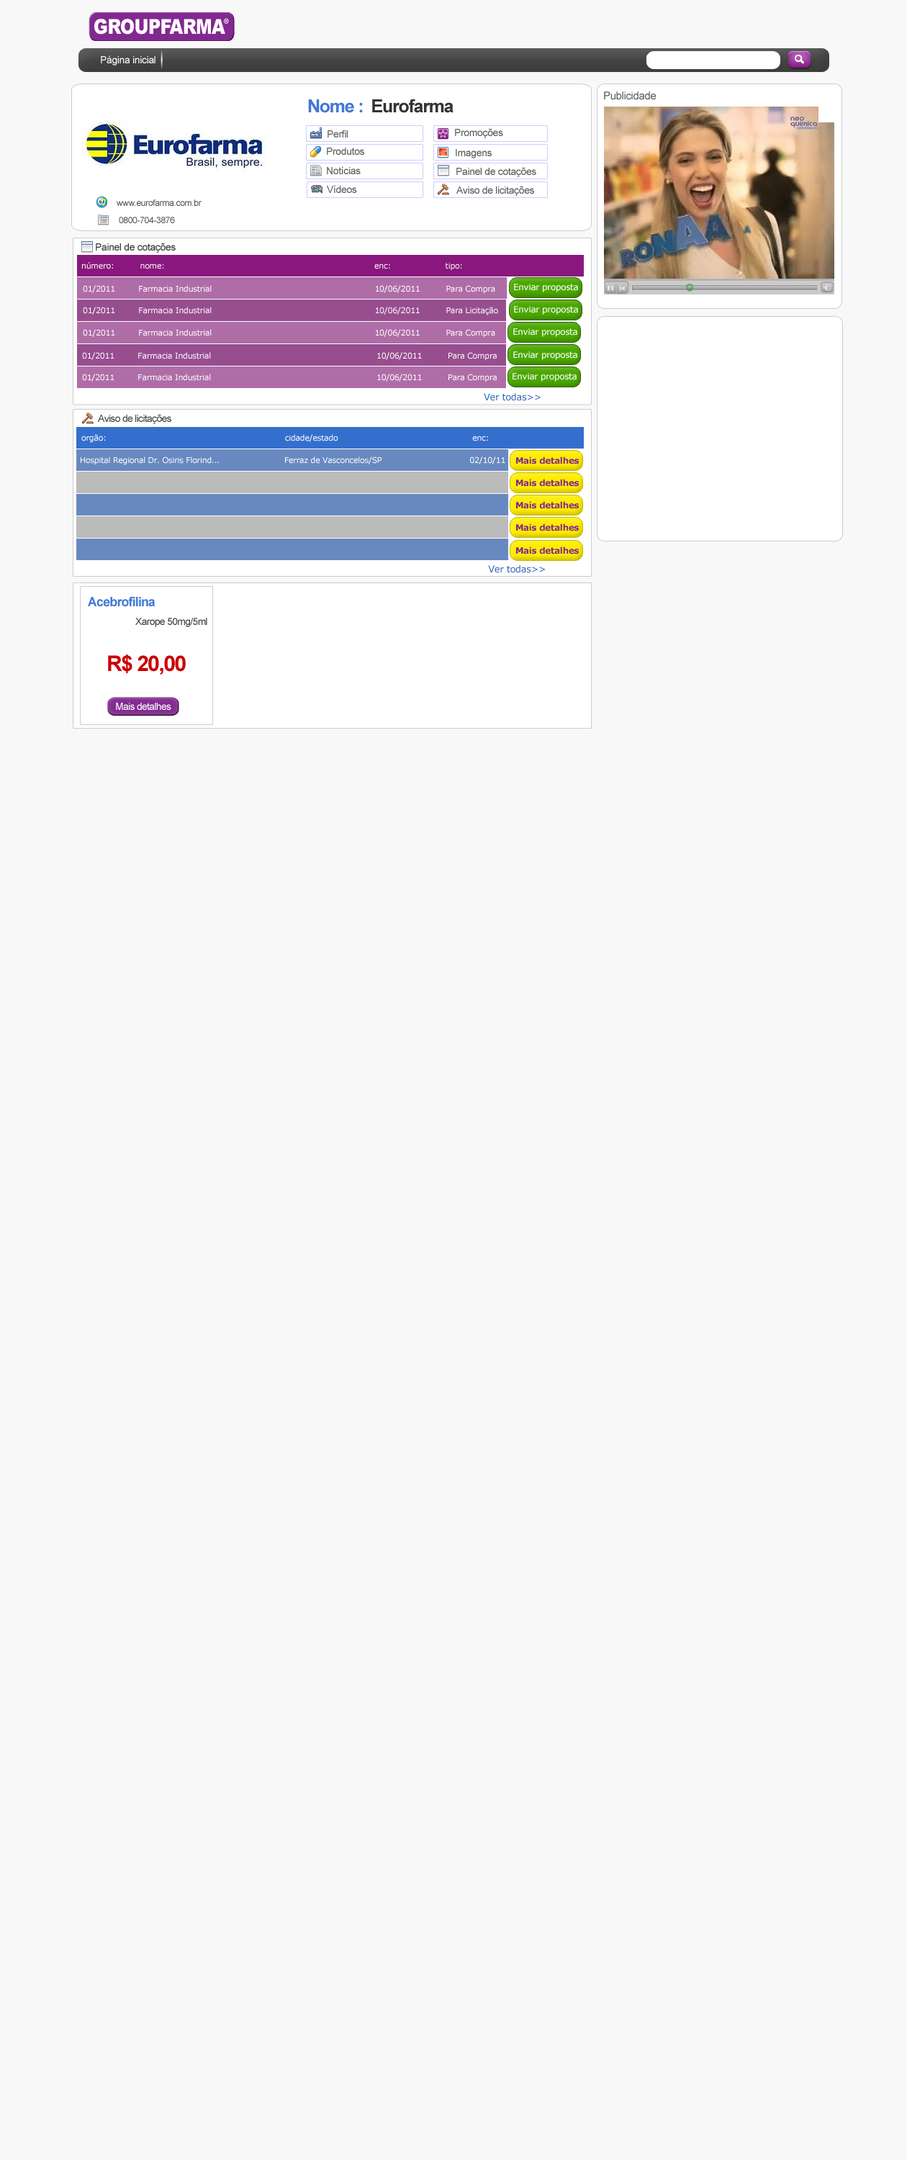
<style>
.page{position:relative;width:907px;height:2160px;background:#f8f8f8}
.page>*{position:absolute;margin:0}
.t1{font:20.7px "Arial-Black";letter-spacing:-0.025em;color:#fefefe;scale:0.83 1}
.t2{font:10.1px "ArialMT";letter-spacing:-0.025em;color:#fefefe}
.t3{font:18px "Arial-BoldMT";letter-spacing:-0.05em;color:#333333}
.t4{font:18px "Arial-BoldMT";letter-spacing:-0.05em;color:#4179d5}
.t5{font:10.8px "ArialMT";letter-spacing:-0.025em;color:#595958}
.t6{font:10.1px "ArialMT";letter-spacing:-0.025em;color:#595958}
.t7{font:8.6px "ArialMT";letter-spacing:-0.025em;color:#4c4c4c}
.t8{font:10.1px "ArialMT";letter-spacing:-0.025em;color:#333333}
.t9{font:7.9px "Verdana";letter-spacing:-0.025em;color:#fefefe}
.t10{font:8.6px "Verdana";letter-spacing:-0.025em;color:#fefefe}
.t11{font:9.4px "Verdana";letter-spacing:-0.025em;color:#3568b8}
.t12{font:10.1px "ArialMT";letter-spacing:-0.05em;color:#444444}
.t13{font:7.9px "Verdana";letter-spacing:-0.025em;color:#ffffff}
.t14{font:8.6px "Verdana-Bold";letter-spacing:-0.025em;color:#812990}
.t15{font:13px "Arial-BoldMT";letter-spacing:-0.05em;color:#4179d5}
.t16{font:10.1px "ArialMT";letter-spacing:-0.05em;color:#414141}
.t17{font:21.6px "Arial-BoldMT";letter-spacing:-0.05em;color:#cc0000}
.t18{font:10.1px "ArialMT";letter-spacing:-0.05em;color:#fdfdfd}
</style>
<div class="page">
<p class="t1" style="left:94px;top:19px;width:131px;height:16px">GROUPFARMA</p>
<p class="t2" style="left:101px;top:55px;width:55px;height:11px">Página inicial</p>
<p class="t3" style="left:308px;top:99px;width:146px;height:14px"><span class="t4">Nome :  </span>Eurofarma</p>
<p class="t5" style="left:604px;top:91px;width:53px;height:9px">Publicidade</p>
<p class="t6" style="left:328px;top:130px;width:20px;height:8px">Perfil</p>
<p class="t6" style="left:455px;top:128px;width:48px;height:10px">Promoções</p>
<p class="t6" style="left:327px;top:148px;width:37px;height:7px">Produtos</p>
<p class="t6" style="left:456px;top:149px;width:36px;height:9px">Imagens</p>
<p class="t6" style="left:327px;top:166px;width:34px;height:8px">Notícias</p>
<p class="t6" style="left:456px;top:167px;width:80px;height:10px">Painel de cotações</p>
<p class="t6" style="left:327px;top:185px;width:30px;height:8px">Vídeos</p>
<p class="t6" style="left:456px;top:186px;width:78px;height:10px">Aviso de licitações</p>
<p class="t7" style="left:117px;top:199px;width:85px;height:7px">www.eurofarma.com.br</p>
<p class="t7" style="left:119px;top:217px;width:56px;height:6px">0800-704-3876</p>
<p class="t8" style="left:96px;top:243px;width:80px;height:10px">Painel de cotações</p>
<p class="t9" style="left:82px;top:262px;width:380px;height:9px">número:          nome:                                                                                 enc:                     tipo:</p>
<p class="t9" style="left:83px;top:285px;width:412px;height:9px">01/2011         Farmacia Industrial                                                               10/06/2011          Para Compra</p>
<p class="t10" style="left:514px;top:284px;width:64px;height:8px">Enviar proposta</p>
<p class="t9" style="left:83px;top:307px;width:415px;height:8px">01/2011         Farmacia Industrial                                                               10/06/2011          Para Licitação</p>
<p class="t10" style="left:514px;top:306px;width:64px;height:9px">Enviar proposta</p>
<p class="t9" style="left:83px;top:329px;width:412px;height:9px">01/2011         Farmacia Industrial                                                               10/06/2011          Para Compra</p>
<p class="t10" style="left:513px;top:328px;width:64px;height:9px">Enviar proposta</p>
<p class="t9" style="left:82px;top:352px;width:415px;height:9px">01/2011         Farmacia Industrial                                                                10/06/2011          Para Compra</p>
<p class="t10" style="left:513px;top:351px;width:64px;height:9px">Enviar proposta</p>
<p class="t9" style="left:82px;top:374px;width:415px;height:8px">01/2011         Farmacia Industrial                                                                10/06/2011          Para Compra</p>
<p class="t10" style="left:513px;top:373px;width:64px;height:9px">Enviar proposta</p>
<p class="t11" style="left:484px;top:393px;width:57px;height:8px">Ver todas&gt;&gt;</p>
<p class="t12" style="left:98px;top:414px;width:73px;height:10px">Aviso de licitações</p>
<p class="t13" style="left:81px;top:434px;width:407px;height:9px">orgão:                                                                     cidade/estado                                                    enc:</p>
<p class="t9" style="left:81px;top:456px;width:424px;height:9px">Hospital Regional Dr. Osiris Florind...                         Ferraz de Vasconcelos/SP                                  02/10/11</p>
<p class="t14" style="left:516px;top:456px;width:63px;height:8px">Mais detalhes</p>
<p class="t14" style="left:516px;top:479px;width:63px;height:8px">Mais detalhes</p>
<p class="t14" style="left:516px;top:501px;width:63px;height:8px">Mais detalhes</p>
<p class="t14" style="left:516px;top:523px;width:63px;height:8px">Mais detalhes</p>
<p class="t14" style="left:516px;top:546px;width:63px;height:8px">Mais detalhes</p>
<p class="t11" style="left:488px;top:565px;width:57px;height:8px">Ver todas&gt;&gt;</p>
<p class="t15" style="left:88px;top:596px;width:68px;height:11px">Acebrofilina</p>
<p class="t16" style="left:135px;top:618px;width:72px;height:9px">Xarope 50mg/5ml</p>
<p class="t17" style="left:108px;top:654px;width:78px;height:21px">R$ 20,00</p>
<p class="t18" style="left:116px;top:703px;width:55px;height:7px">Mais detalhes</p>
</div>
